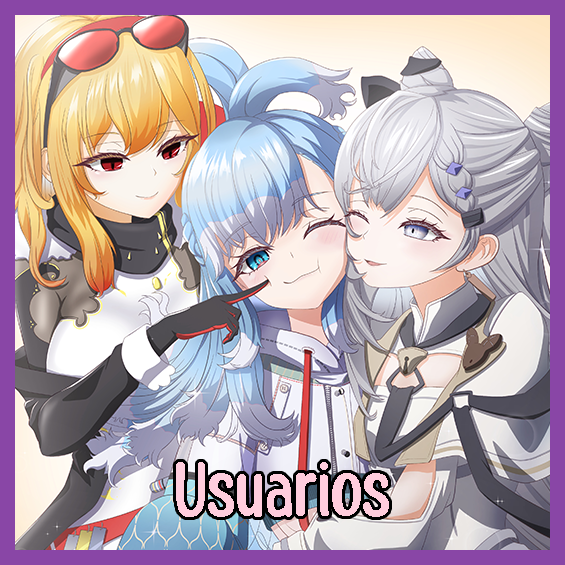
<style>
.page{position:relative;width:565px;height:565px}
.page>*{position:absolute;margin:0}
.t1{font:85.1px "HoneyNotes-Regular";color:#ffcddd}
</style>
<div class="page">
<p class="t1" style="left:176px;top:462px;width:213px;height:55px">Usuarios</p>
</div>
